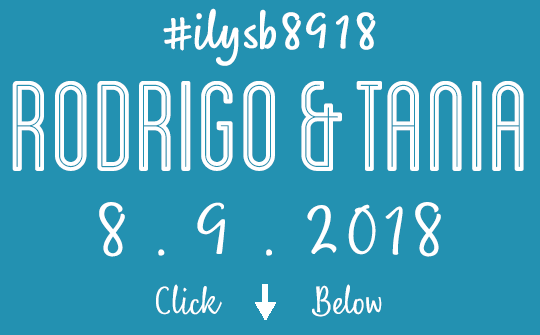
<style>
.page{position:relative;width:540px;height:335px;background:#2391b1}
.page>*{position:absolute;margin:0}
.t1{font:48px "Nefelibata-Script";color:#ffffff;font-weight:bold}
.t2{font:135px "Blanch-CondensedInline";color:#ffffff}
.t3{font:72px "Nefelibata-Script";color:#ffffff}
.t4{font:36px "Nefelibata-Script";color:#ffffff}
</style>
<div class="page">
<p class="t1" style="left:163px;top:8px;width:213px;height:58px">#ilysb8918</p>
<p class="t2" style="left:12px;top:81px;width:263px;height:90px">Rodrigo</p>
<p class="t2" style="left:301px;top:81px;width:41px;height:90px">&amp;</p>
<p class="t2" style="left:356px;top:81px;width:168px;height:90px">Tania</p>
<p class="t3" style="left:99px;top:202px;width:342px;height:55px">8 . 9 . 2018</p>
<p class="t4" style="left:156px;top:284px;width:66px;height:31px">Click</p>
<p class="t4" style="left:312px;top:284px;width:70px;height:33px">Below</p>
</div>
